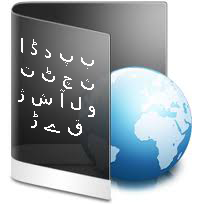
<style>
.page{position:relative;width:204px;height:204px}
.page>*{position:absolute;margin:0}
.t1{font:19.4px "Tahoma";color:#fdfcfc;scale:0.96 1}
</style>
<div class="page">
<p class="t1" style="left:18px;top:38px;width:77px;height:98px;rotate:12deg">ا ڈ د پ ب ت ٹ چ ث ژ ش آ ل و ڑ ے ق</p>
</div>
